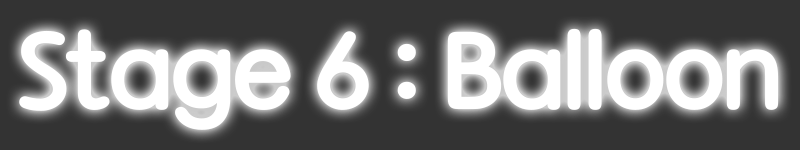
<style>
.page{position:relative;width:800px;height:150px;background:#333333}
.page>*{position:absolute;margin:0}
.t1{font:105px "TTAppgulimR";letter-spacing:-0.05em;color:#ffffff}
</style>
<div class="page">
<p class="t1" style="left:19px;top:28px;width:760px;height:102px">Stage 6 : Balloon</p>
</div>
